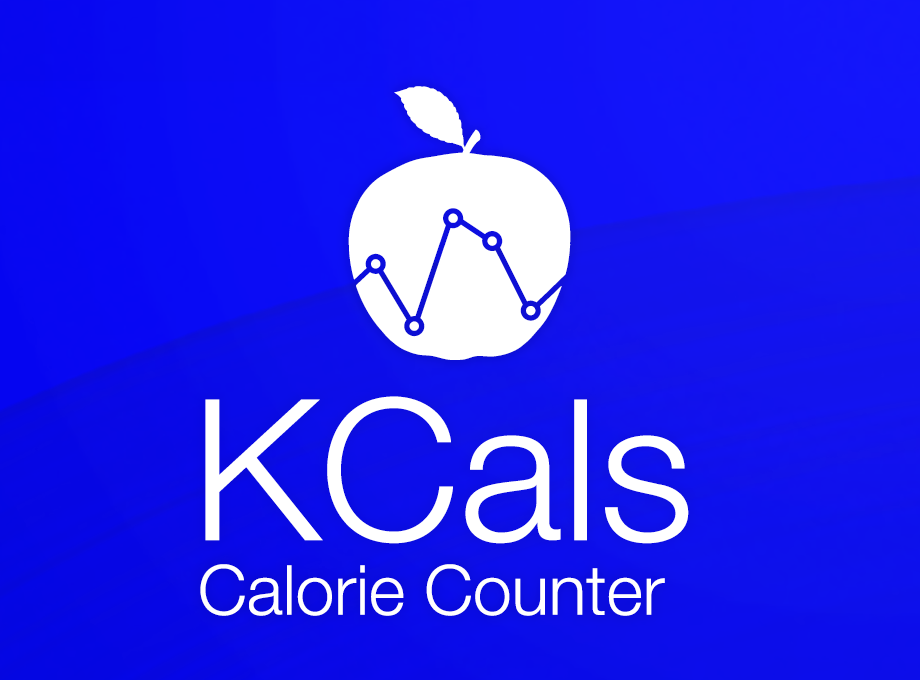
<style>
.page{position:relative;width:920px;height:680px}
.page>*{position:absolute;margin:0}
.t1{font:353.3px "kcal";color:#fefefe}
.t2{font:196.9px "HelveticaNeueLTStd-Lt";color:#ffffff}
.t3{font:68.9px "HelveticaNeueLTStd-Lt";color:#ffffff}
</style>
<div class="page">
<p class="t1" style="left:348px;top:86px;width:223px;height:274px">k</p>
<p class="t2" style="left:205px;top:396px;width:484px;height:148px">KCals</p>
<p class="t3" style="left:200px;top:564px;width:465px;height:52px">Calorie Counter</p>
</div>
